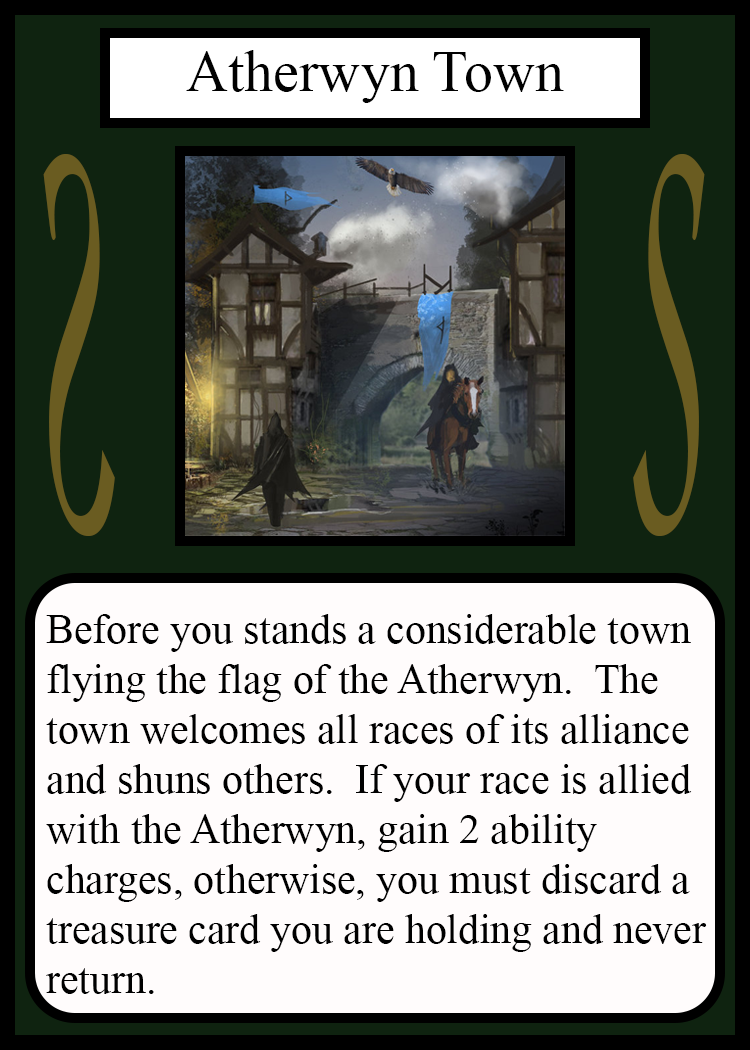
<style>
.page{position:relative;width:750px;height:1050px;background:#fffcfc}
.page>*{position:absolute;margin:0}
.t1{font:58.3px "TimesNewRomanPSMT";color:#010101}
.t2{font:548.5px "Apple-Chancery";color:#6a5c21;scale:0.27 1}
.t3{font:548.2px "Apple-Chancery";color:#6a5c21;scale:0.27 1}
.t4{font:41.7px "TimesNewRomanPSMT";color:#000000}
</style>
<div class="page">
<p class="t1" style="left:186px;top:50px;width:378px;height:53px">Atherwyn Town</p>
<p class="t2" style="left:43px;top:154px;width:72px;height:382px;rotate:180deg">S</p>
<p class="t3" style="left:633px;top:154px;width:72px;height:382px">S</p>
<p class="t4" style="left:46px;top:614px;width:661px;height:380px">Before you stands a considerable town<br>flying the flag of the Atherwyn.  The<br>town welcomes all races of its alliance<br>and shuns others.  If your race is allied<br>with the Atherwyn, gain 2 ability<br>charges, otherwise, you must discard a<br>treasure card you are holding and never<br>return.</p>
</div>
